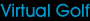
<style>
.page{position:relative;width:90px;height:21px;background:#000000}
.page>*{position:absolute;margin:0}
.t1{font:18px "AvantGardeITCbyBT-Medium";color:#0099cc}
</style>
<div class="page">
<p class="t1" style="left:0px;top:3px;width:90px;height:14px">Virtual Golf</p>
</div>
